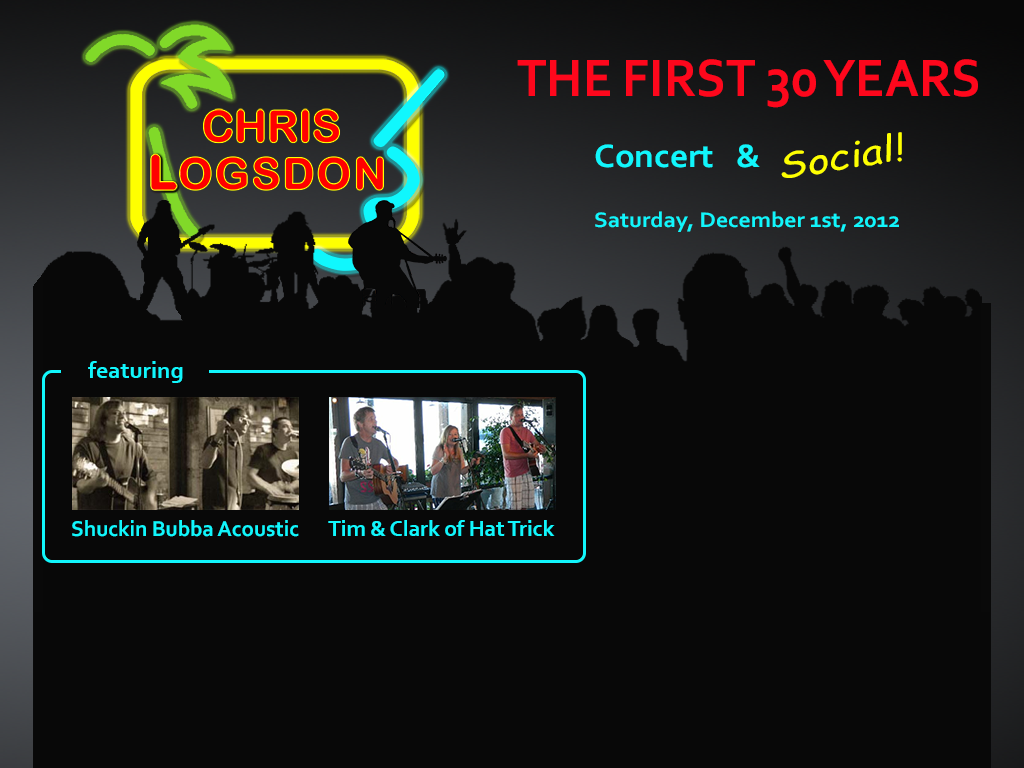
<style>
.page{position:relative;width:1024px;height:768px;background:#080808}
.page>*{position:absolute;margin:0}
.t1{font:55.4px "Corbel-Bold";color:#fe071c;scale:0.93 1}
.t2{font:35.9px "ComicSansMS";color:#feff01;scale:1.16 1}
.t3{font:34px "Corbel-Bold";color:#11f6fc;scale:1.04 1}
.t4{font:22px "Corbel-Bold";color:#11f6fc;scale:1.08 1}
.t5{font:24px "Corbel-Bold";color:#11f6fc}
.t6{font:22.5px "Corbel-Bold";color:#11f6fc}
</style>
<div class="page">
<p class="t1" style="left:517px;top:59px;width:461px;height:49px">THE FIRST 30 YEARS</p>
<p class="t2" style="left:781px;top:132px;width:121px;height:46px;rotate:-9deg">Social!</p>
<p class="t3" style="left:595px;top:144px;width:165px;height:24px">Concert   &amp;</p>
<p class="t4" style="left:595px;top:211px;width:304px;height:21px">Saturday, December 1st, 2012</p>
<p class="t5" style="left:88px;top:361px;width:95px;height:22px">featuring</p>
<p class="t6" style="left:72px;top:520px;width:227px;height:17px">Shuckin Bubba Acoustic</p>
<p class="t6" style="left:328px;top:520px;width:227px;height:16px">Tim &amp; Clark of Hat Trick</p>
</div>
